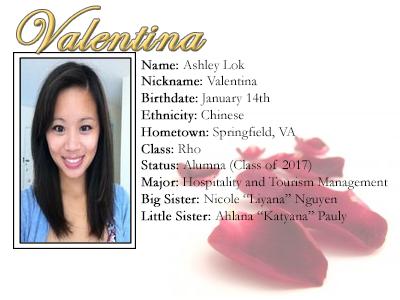
<style>
.page{position:relative;width:400px;height:300px;background:#ffffff}
.page>*{position:absolute;margin:0}
.t1{font:60px "EdwardianScriptITC";font-weight:bold}
.t2{font:14px "Garamond";color:#000000}
.t3{font:14px "Garamond";color:#000000;font-weight:bold}
</style>
<div class="page">
<p class="t1" style="left:17px;top:6px;width:189px;height:48px">Valentina</p>
<p class="t2" style="left:141px;top:59px;width:247px;height:165px"><span class="t3">Name: </span>Ashley Lok<br><span class="t3">Nickname:</span> Valentina<br><span class="t3">Birthdate:</span> January 14th<br><span class="t3">Ethnicity:</span> Chinese<br><span class="t3">Hometown:</span> Springfield, VA<br><span class="t3">Class:</span> Rho<br><span class="t3">Status:</span> Alumna (Class of 2017)<br><span class="t3">Major:</span> Hospitality and Tourism Management<br><span class="t3">Big Sister: </span>Nicole “Liyana” Nguyen<br><span class="t3">Little Sister: </span>Ahlana “Katyana” Pauly</p>
</div>
